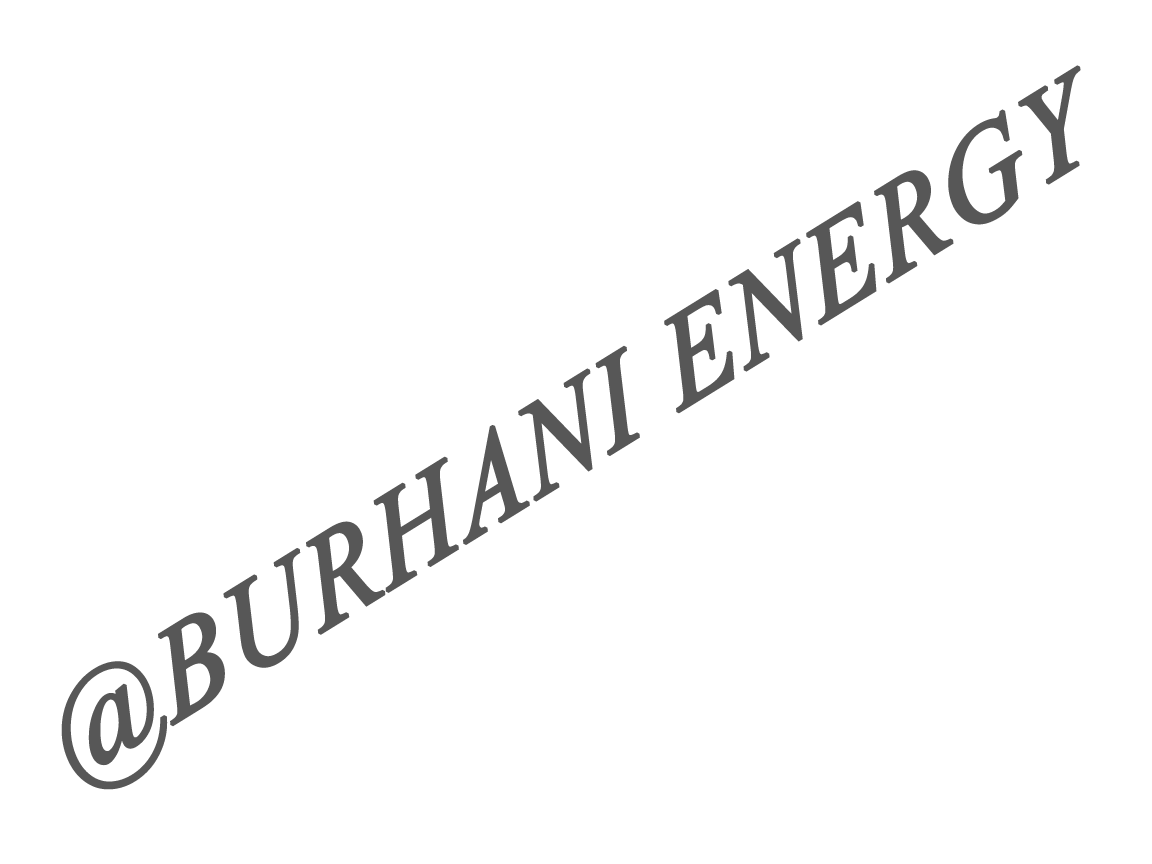
<style>
.page{position:relative;width:1152px;height:864px;background:#ffffff}
.page>*{position:absolute;margin:0}
.t1{font:125px "TimesNewRomanPS-ItalicMT";color:#575757;font-weight:bold;font-style:italic}
</style>
<div class="page">
<p class="t1" style="left:61px;top:65px;width:1020px;height:725px;rotate:-32deg">@BURHANI ENERGY</p>
</div>
